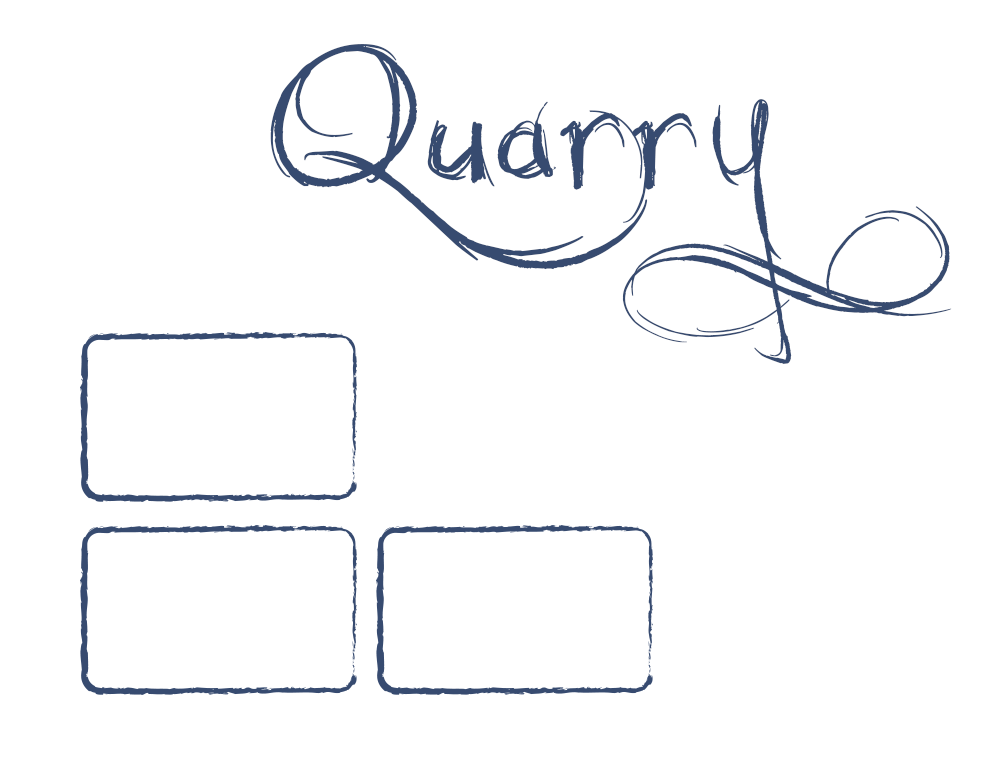
<style>
.page{position:relative;width:1004px;height:768px;background:#ffffff}
.page>*{position:absolute;margin:0}
.t1{font:288.2px "Dunno";color:#374b70}
</style>
<div class="page">
<p class="t1" style="left:270px;top:44px;width:682px;height:320px">Quarry</p>
</div>
